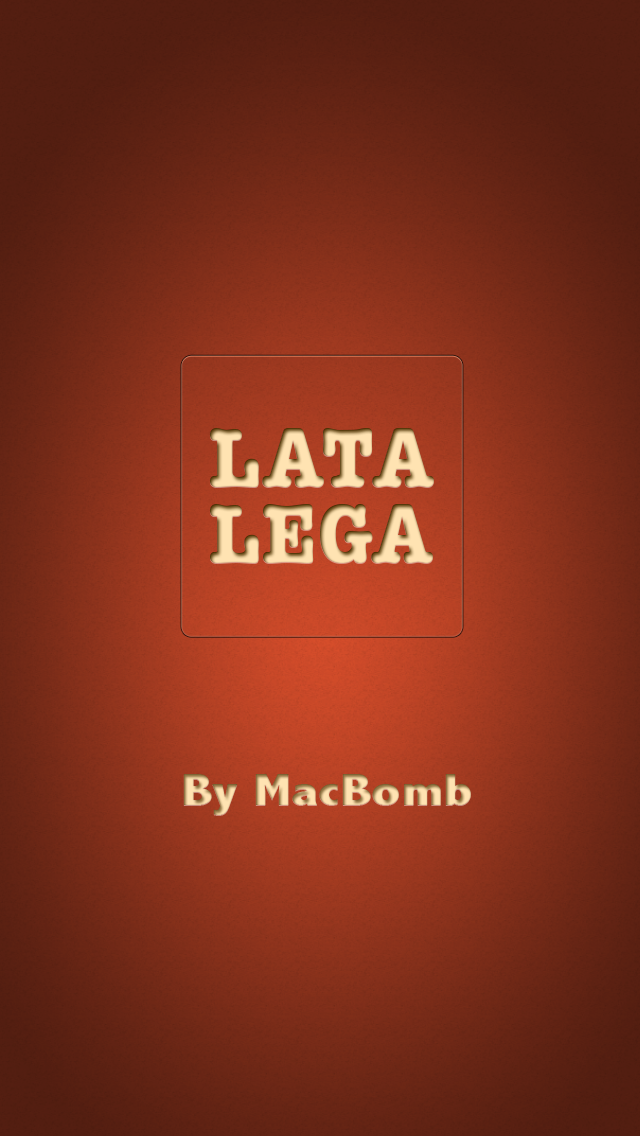
<style>
.page{position:relative;width:640px;height:1136px}
.page>*{position:absolute;margin:0}
.t1{font:84.7px/76px "AmericanTypewriter-CondensedBold";color:#ffe3b2;scale:1.18 1}
.t2{font:46.2px "AbadiMT-CondensedExtraBold";scale:1.3 1}
</style>
<div class="page">
<p class="t1" style="left:209px;top:428px;width:225px;height:135px;text-align:center">LATA<br>LEGA</p>
<p class="t2" style="left:183px;top:774px;width:288px;height:41px">By MacBomb</p>
</div>
